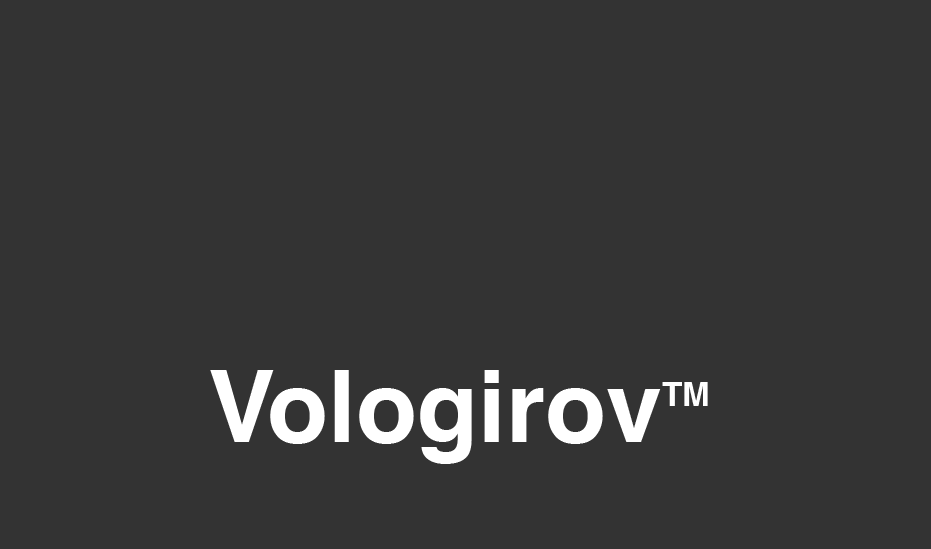
<style>
.page{position:relative;width:931px;height:549px;background:#333333}
.page>*{position:absolute;margin:0}
.t1{font:100px "Helvetica-Bold";color:#ffffff}
.t2{font:33.3px "Helvetica-Bold";color:#ffffff}
</style>
<div class="page">
<p class="t1" style="left:210px;top:370px;width:451px;height:94px">Vologirov</p>
<p class="t2" style="left:662px;top:382px;width:46px;height:24px">TM</p>
</div>
